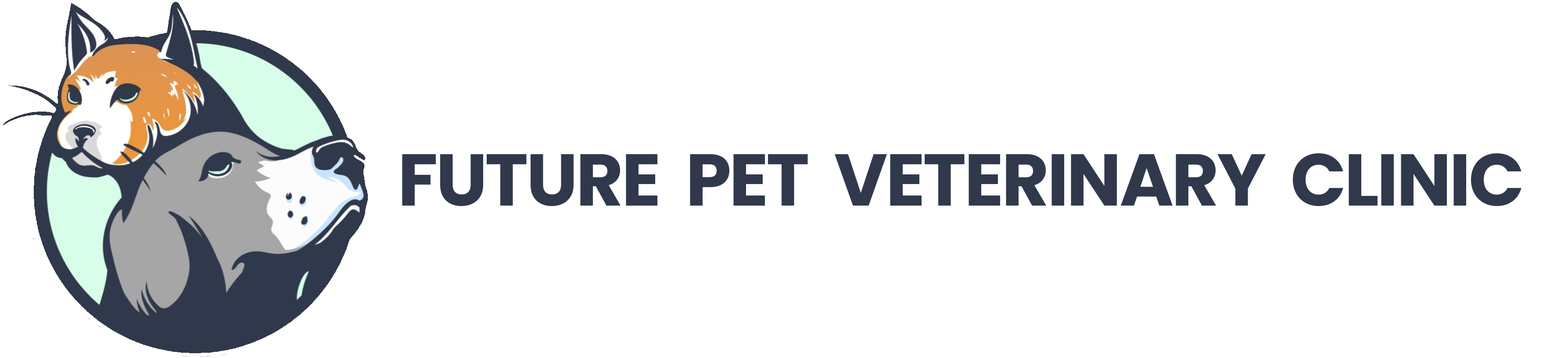
<style>
.page{position:relative;width:1568px;height:358px;background:#ffffff}
.page>*{position:absolute;margin:0}
.t1{font:73.3px "Poppins-Bold";letter-spacing:-0.03em;color:#30394c;text-transform:uppercase}
</style>
<div class="page">
<p class="t1" style="left:402px;top:153px;width:1119px;height:53px">Future  pet  veterinary  clinic</p>
</div>
